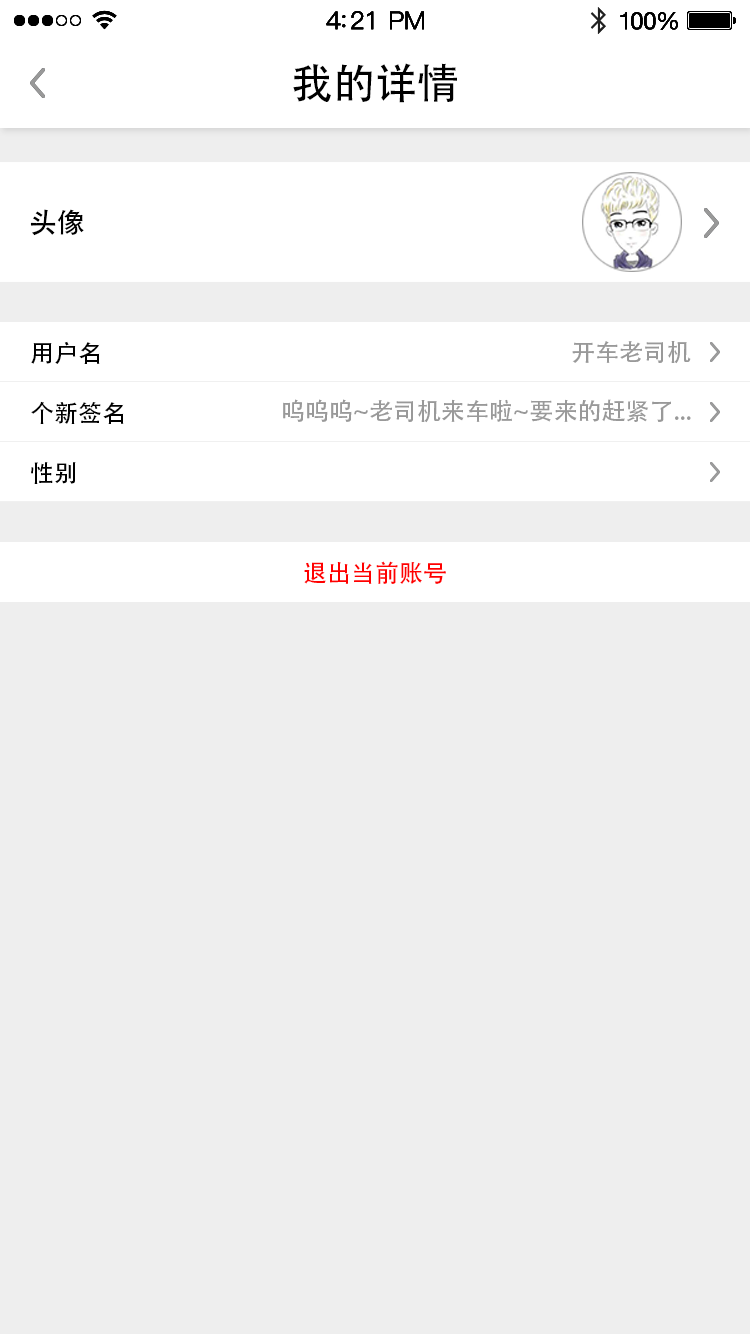
<style>
.page{position:relative;width:750px;height:1334px;background:#eeeeee}
.page>*{position:absolute;margin:0}
.t1{font:42px "AdobeHeitiStd-Regular";color:#000000}
.t2{font:28px "AdobeHeitiStd-Regular";color:#000000}
.t3{font:24px "AdobeHeitiStd-Regular";color:#000000}
.t4{font:24px "AdobeHeitiStd-Regular";color:#999999}
.t5{font:24px "AdobeHeitiStd-Regular";color:#ff0000}
</style>
<div class="page">
<p class="t1" style="left:293px;top:63px;width:164px;height:40px">我的详情</p>
<p class="t2" style="left:30px;top:209px;width:54px;height:27px">头像</p>
<p class="t3" style="left:31px;top:341px;width:69px;height:23px">用户名</p>
<p class="t4" style="left:572px;top:341px;width:119px;height:23px">开车老司机</p>
<p class="t3" style="left:31px;top:401px;width:93px;height:23px">个新签名</p>
<p class="t4" style="left:283px;top:399px;width:408px;height:24px">呜呜呜~老司机来车啦~要来的赶紧了...</p>
<p class="t3" style="left:31px;top:462px;width:45px;height:22px">性别</p>
<p class="t5" style="left:304px;top:561px;width:142px;height:23px">退出当前账号</p>
</div>
